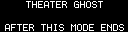
<style>
.page{position:relative;width:128px;height:32px;background:#000000}
.page>*{position:absolute;margin:0}
.t1{font:8px "Terminal";color:#ffffff}
</style>
<div class="page">
<p class="t1" style="left:26px;top:1px;width:77px;height:7px">THEATER GHOST</p>
<p class="t1" style="left:5px;top:24px;width:119px;height:7px">AFTER THIS MODE ENDS</p>
</div>
